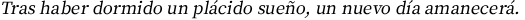
<style>
.page{position:relative;width:525px;height:20px;background:#ffffff}
.page>*{position:absolute;margin:0}
.t1{font:20px "OfficialFateFont-Medium";color:#000000;font-style:italic}
</style>
<div class="page">
<p class="t1" style="left:1px;top:0px;width:518px;height:19px">Tras haber dormido un plácido sueño, un nuevo día amanecerá.</p>
</div>
